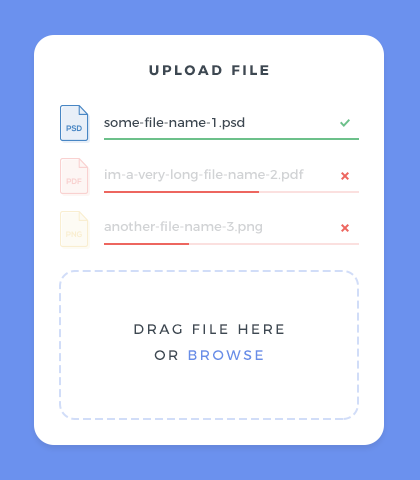
<style>
.page{position:relative;width:420px;height:480px;background:#ffffff}
.page>*{position:absolute;margin:0}
.t1{font:14px "Montserrat-Bold";letter-spacing:0.18em;color:#3d4852;text-transform:uppercase}
.t2{font:13px "Montserrat-Regular";color:#3d4852}
.t3{font:13px "Montserrat-Regular";color:#d1d3d5}
.t4{font:14px/26px "Montserrat-Regular";letter-spacing:0.18em;color:#3d4852;text-transform:uppercase}
.t5{font:14px/26px "Montserrat-Regular";letter-spacing:0.18em;color:#688ee8;text-transform:uppercase}
</style>
<div class="page">
<p class="t1" style="left:149px;top:65px;width:120px;height:11px">Upload file</p>
<p class="t2" style="left:104px;top:117px;width:141px;height:13px">some-file-name-1.psd</p>
<p class="t3" style="left:105px;top:169px;width:199px;height:13px">im-a-very-long-file-name-2.pdf</p>
<p class="t3" style="left:104px;top:221px;width:158px;height:13px">another-file-name-3.png</p>
<p class="t4" style="left:134px;top:324px;width:150px;height:36px;text-align:center">Drag file here<br>or <span class="t5">browse</span></p>
</div>
